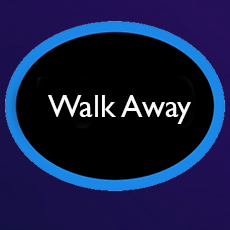
<style>
.page{position:relative;width:230px;height:230px;background:#000000}
.page>*{position:absolute;margin:0}
.t1{font:32px "GillSansMT";color:#fafafa}
</style>
<div class="page">
<p class="t1" style="left:48px;top:95px;width:143px;height:29px">Walk Away</p>
</div>
